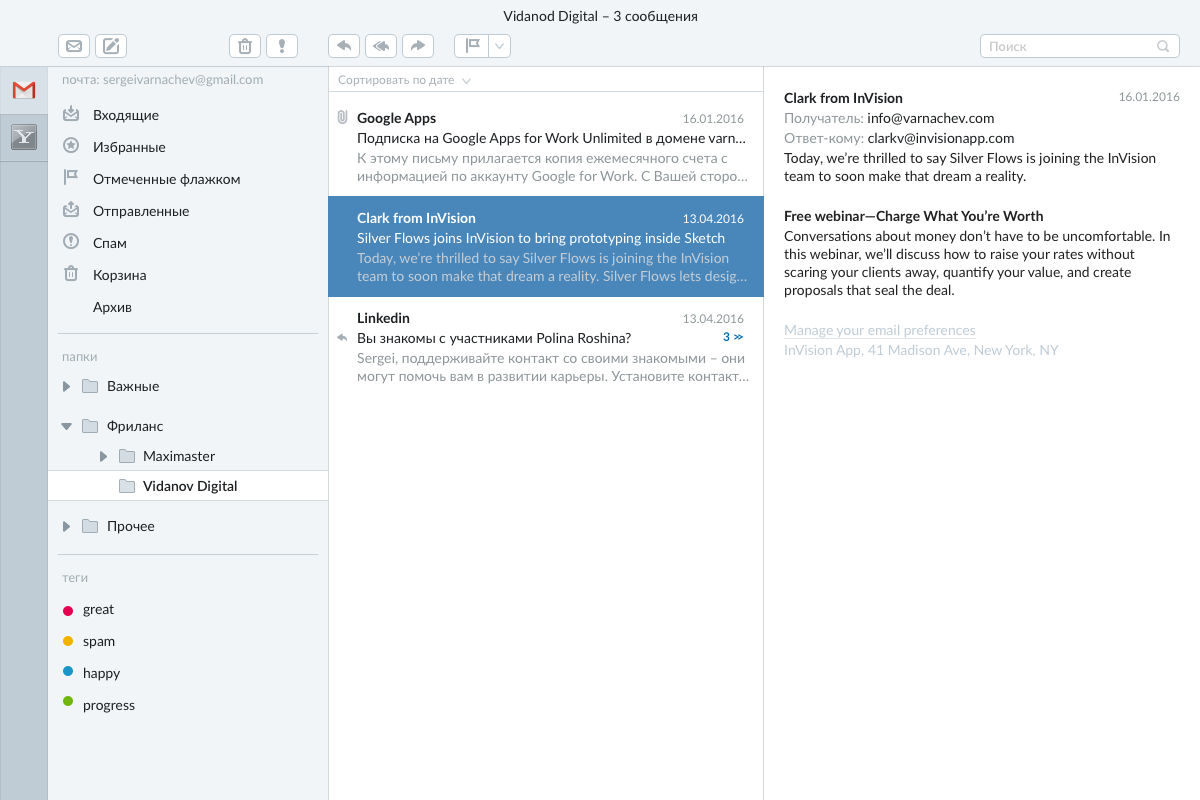
<style>
.page{position:relative;width:1200px;height:800px;background:#ffffff}
.page>*{position:absolute;margin:0}
.t1{font:14px "Lato-Regular";color:#1e2123}
.t2{font:13px "Lato-Semibold";color:#c8c8c8}
.t3{font:13px "Lato-Regular";color:#a1abb3}
.t4{font:12px "Lato-Regular";color:#a8b0b7}
.t5{font:14px/18px "Lato-Regular";color:#222223}
.t6{font:14px/18px "Lato-Bold";color:#1e2123}
.t7{font:14px/18px "Lato-Regular";color:#8e9699}
.t8{font:14px/18px "Lato-Regular";color:#1e2123}
.t9{font:14px/18px "Lato-Bold";color:#222223}
.t10{font:14px/18px "Lato-Regular";color:#bfccd6;text-decoration:underline}
.t11{font:14px/18px "Lato-Regular";color:#bfccd6}
.t12{font:12px "Lato-Regular";color:#8e9699}
.t13{font:14px/32px "Lato-Regular";color:#1e2123}
.t14{font:14px/18px "Lato-Regular";color:#c3ccd4}
.t15{font:14px/18px "Lato-Bold";color:#ffffff}
.t16{font:14px/18px "Lato-Regular";color:#ffffff}
.t17{font:12px "Lato-Regular";color:#ffffff}
.t18{font:12px/18px "Lato-Regular";color:#8e9699}
.t19{font:12px/18px "Lato-Bold";color:#006bb3}
.t20{font:12px/18px "Lato-Bold";letter-spacing:-0.24em;color:#006bb3}
.t21{font:14px/30px "Lato-Regular";color:#1e2123}
.t22{font:14px/30px "Lato-Semibold";color:#1e2123}
</style>
<div class="page">
<p class="t1" style="left:503px;top:10px;width:194px;height:14px">Vidanod Digital – 3 сообщения</p>
<p class="t2" style="left:990px;top:41px;width:37px;height:11px">Поиск</p>
<p class="t3" style="left:62px;top:74px;width:201px;height:13px">почта: sergeivarnachev@gmail.com</p>
<p class="t4" style="left:338px;top:75px;width:116px;height:12px">Сортировать по дате</p>
<p class="t5" style="left:784px;top:92px;width:386px;height:266px"><span class="t6">Clark from InVision<br></span><span class="t7">Получатель: </span><span class="t8">info@varnachev.com<br></span><span class="t7">Ответ-кому: </span><span class="t8">clarkv@invisionapp.com<br></span>Today, we’re thrilled to say Silver Flows is joining the InVision<br>team to soon make that dream a reality.<br><br><span class="t9">Free webinar—Charge What You’re Worth<br></span>Conversations about money don’t have to be uncomfortable. In this webinar, we’ll discuss how to raise your rates without scaring your clients away, quantify your value, and create proposals that seal the deal.<br><br><span class="t10">Manage your email preferences<br></span><span class="t11">InVision App, 41 Madison Ave, New York, NY</span></p>
<p class="t12" style="left:1119px;top:92px;width:61px;height:10px">16.01.2016</p>
<p class="t13" style="left:93px;top:110px;width:147px;height:205px">Входящие<br>Избранные<br>Отмеченные флажком<br>Отправленные<br>Спам<br>Корзина<br>Архив</p>
<p class="t7" style="left:357px;top:112px;width:390px;height:72px"><span class="t6">Google Apps<br></span><span class="t8">Подписка на Google Apps for Work Unlimited в домене varn…<br></span>К этому письму прилагается копия ежемесячного счета с<br>информацией по аккаунту Google for Work. С Вашей сторо…</p>
<p class="t12" style="left:683px;top:114px;width:61px;height:10px">16.01.2016</p>
<p class="t14" style="left:357px;top:212px;width:390px;height:72px"><span class="t15">Clark from InVision<br></span><span class="t16">Silver Flows joins InVision to bring prototyping inside Sketch<br></span>Today, we’re thrilled to say Silver Flows is joining the InVision<br>team to soon make that dream a reality. Silver Flows lets desig…</p>
<p class="t17" style="left:683px;top:214px;width:61px;height:10px">13.04.2016</p>
<p class="t7" style="left:357px;top:312px;width:392px;height:72px"><span class="t6">Linkedin<br></span><span class="t8">Вы знакомы с участниками Polina Roshina?<br></span>Sergei, поддерживайте контакт со своими знакомыми – они<br>могут помочь вам в развитии карьеры. Установите контакт…</p>
<p class="t18" style="left:683px;top:314px;width:61px;height:28px;text-align:right">13.04.2016<br><span class="t19">3 </span><span class="t20">&gt;&gt;</span></p>
<p class="t3" style="left:62px;top:354px;width:35px;height:8px">папки</p>
<p class="t21" style="left:107px;top:381px;width:130px;height:153px">Важные<br>Фриланс<br> Maximaster<br> <span class="t22">Vidanov Digital<br></span>Прочее</p>
<p class="t3" style="left:62px;top:575px;width:26px;height:8px">теги</p>
<p class="t13" style="left:83px;top:604px;width:52px;height:109px">great<br>spam<br>happy<br>progress</p>
</div>
